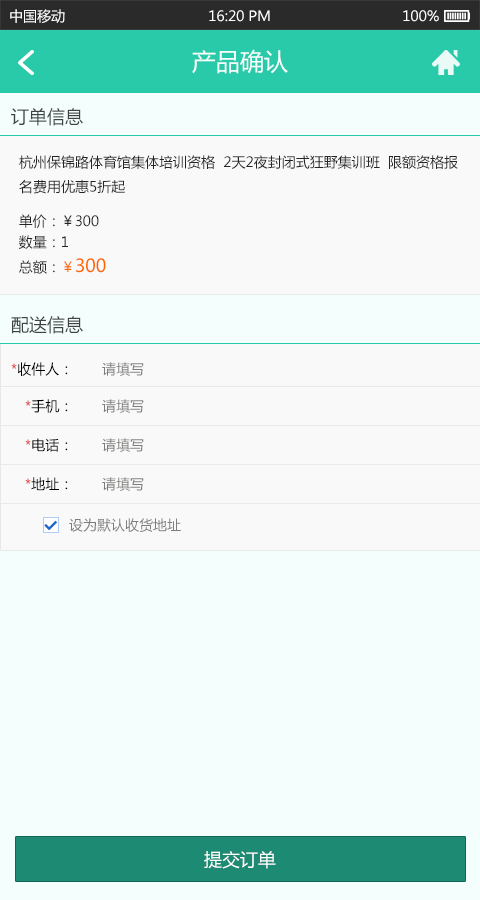
<style>
.page{position:relative;width:480px;height:900px;background:#f4fffd}
.page>*{position:absolute;margin:0}
.t1{font:14px "MicrosoftYaHei";color:#ffffff}
.t2{font:24px "MicrosoftYaHei";color:#f4fffd}
.t3{font:18px "MicrosoftYaHei";color:#404344}
.t4{font:14px "MicrosoftYaHei";color:#252525}
.t5{font:14px/21px "MicrosoftYaHei";color:#252525}
.t6{font:14px/21px "MicrosoftYaHei";color:#fe6600}
.t7{font:18px/21px "MicrosoftYaHei";color:#fe6600}
.t8{font:14px "MicrosoftYaHei";color:#000000}
.t9{font:14px "MicrosoftYaHei";color:#db1c1c}
.t10{font:14px "MicrosoftYaHei";color:#7d7d7b}
.t11{font:18px "MicrosoftYaHei";color:#ffffff}
</style>
<div class="page">
<p class="t1" style="left:10px;top:9px;width:55px;height:14px">中国移动</p>
<p class="t1" style="left:209px;top:10px;width:61px;height:12px">16:20 PM</p>
<p class="t1" style="left:403px;top:10px;width:36px;height:12px">100%</p>
<p class="t2" style="left:192px;top:49px;width:96px;height:25px">产品确认</p>
<p class="t3" style="left:11px;top:108px;width:72px;height:18px">订单信息</p>
<p class="t4" style="left:19px;top:155px;width:439px;height:39px">杭州保锦路体育馆集体培训资格  2天2夜封闭式狂野集训班  限额资格报<br>名费用优惠5折起</p>
<p class="t5" style="left:18px;top:214px;width:88px;height:60px">单价：￥300<br>数量：1<br>总额：<span class="t6">￥</span><span class="t7">300</span></p>
<p class="t3" style="left:11px;top:316px;width:72px;height:18px">配送信息</p>
<p class="t8" style="left:11px;top:362px;width:57px;height:14px"><span class="t9">*</span>收件人：</p>
<p class="t10" style="left:102px;top:362px;width:42px;height:14px">请填写</p>
<p class="t8" style="left:25px;top:399px;width:43px;height:14px"><span class="t9">*</span>手机：</p>
<p class="t10" style="left:102px;top:399px;width:42px;height:14px">请填写</p>
<p class="t8" style="left:25px;top:438px;width:43px;height:14px">*电话：</p>
<p class="t10" style="left:102px;top:438px;width:42px;height:14px">请填写</p>
<p class="t8" style="left:25px;top:477px;width:43px;height:14px"><span class="t9">*</span>地址：</p>
<p class="t10" style="left:102px;top:477px;width:42px;height:14px">请填写</p>
<p class="t10" style="left:69px;top:518px;width:112px;height:14px">设为默认收货地址</p>
<p class="t11" style="left:204px;top:851px;width:72px;height:18px">提交订单</p>
</div>
